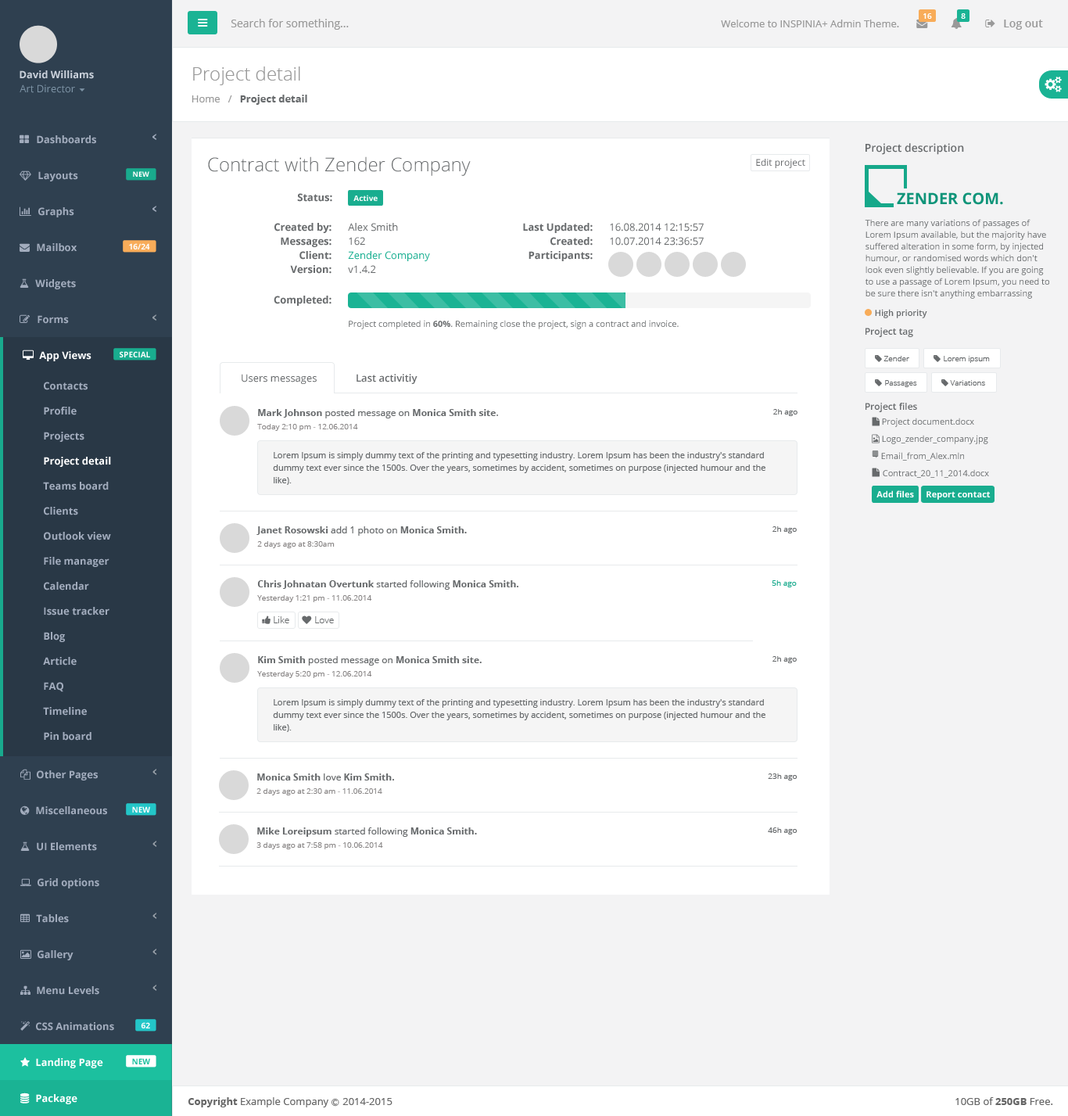
<style>
.page{position:relative;width:1068px;height:1116px;background:#ffffff}
.page>*{position:absolute;margin:0}
.t1{font:7.8px "OpenSans-Semibold";color:#ffffff}
.t2{font:11px "OpenSans";color:#999999}
.t3{font:10.2px "OpenSans";color:#999999}
.t4{font:11px "OpenSans-Semibold";color:#999999}
.t5{font:10.2px "OpenSans-Bold";color:#cad1db}
.t6{font:18.8px "OpenSans-Light";color:#999999}
.t7{font:10.2px "OpenSans";color:#7d93a5}
.t8{font:10.2px "OpenSans-Bold";color:#676a6c}
.t9{font:10.2px "OpenSans-Bold";color:#a2acbd}
.t10{font:11px "OpenSans-Semibold";color:#676a6c}
.t11{font:18.8px "OpenSans-Light";color:#676a6c}
.t12{font:9.4px "OpenSans";color:#676a6c}
.t13{font:7px "OpenSans-Bold";color:#fefefe}
.t14{font:7.7px "OpenSans-Bold";color:#fefefe}
.t15{font:15.6px "OpenSans-Bold";color:#0f9479}
.t16{font:8.6px/11.7px "OpenSans";color:#676a6c}
.t17{font:10.2px "OpenSans";color:#676a6c}
.t18{font:7.8px "OpenSans-Bold";color:#fefefe}
.t19{font:10.2px "OpenSans";color:#19af91}
.t20{font:8.6px "OpenSans-Semibold";color:#676a6c}
.t21{font:8.6px "OpenSans";color:#676a6c}
.t22{font:8.6px "OpenSans-Bold";color:#676a6c}
.t23{font:9.4px "OpenSans-Semibold";color:#676a6c}
.t24{font:10.2px "OpenSans-Bold";color:#ffffff}
.t25{font:7.8px "OpenSans-Light";color:#676a6c}
.t26{font:10.2px "OpenSans-Semibold";color:#676a6c}
.t27{font:9.4px "OpenSans-Bold";color:#676a6c}
.t28{font:7.8px "OpenSans";color:#676a6c}
.t29{font:7.8px "OpenSans";color:#8b8888}
.t30{font:8.6px/12.5px "OpenSans";color:#676a6c}
.t31{font:8.6px "OpenSans-Bold";color:#fefefe}
.t32{font:7.8px "OpenSans";color:#19aa8d}
.t33{font:9.4px "OpenSans-Light";color:#676a6c}
.t34{font:7.8px "OpenSans-Bold";color:#1cc09f}
.t35{font:10.2px "OpenSans";color:#666666}
.t36{font:10.2px "OpenSans-Bold";color:#666666}
.t37{font:7.8px "Meiryo";color:#666666}
</style>
<div class="page">
<p class="t1" style="left:924px;top:13px;width:8px;height:6px">16</p>
<p class="t1" style="left:961px;top:13px;width:5px;height:6px">8</p>
<p class="t2" style="left:231px;top:19px;width:118px;height:11px">Search for something...</p>
<p class="t3" style="left:721px;top:20px;width:178px;height:7px">Welcome to INSPINIA+ Admin Theme.</p>
<p class="t4" style="left:1004px;top:20px;width:39px;height:10px">Log out</p>
<p class="t5" style="left:20px;top:70px;width:74px;height:9px">David Williams</p>
<p class="t6" style="left:193px;top:66px;width:107px;height:19px">Project detail</p>
<p class="t7" style="left:20px;top:84px;width:55px;height:9px">Art Director</p>
<p class="t8" style="left:192px;top:95px;width:115px;height:10px"><span class="t3">Home   /   </span>Project detail</p>
<p class="t9" style="left:37px;top:135px;width:59px;height:9px">Dashboards</p>
<p class="t10" style="left:866px;top:143px;width:98px;height:12px">Project description</p>
<p class="t11" style="left:208px;top:156px;width:263px;height:20px">Contract with Zender Company</p>
<p class="t12" style="left:756px;top:159px;width:50px;height:9px">Edit project</p>
<p class="t9" style="left:38px;top:171px;width:40px;height:10px">Layouts</p>
<p class="t13" style="left:133px;top:171px;width:16px;height:6px">NEW</p>
<p class="t8" style="left:297px;top:193px;width:35px;height:9px">Status:</p>
<p class="t14" style="left:354px;top:195px;width:24px;height:6px">Active</p>
<p class="t15" style="left:897px;top:192px;width:106px;height:13px">ZENDER COM.</p>
<p class="t9" style="left:38px;top:207px;width:36px;height:10px">Graphs</p>
<p class="t16" style="left:865px;top:219px;width:185px;height:80px">There are many variations of passages of Lorem Ipsum available, but the majority have suffered alteration in some form, by injected humour, or randomised words which don't look even slightly believable. If you are going to use a passage of Lorem Ipsum, you need to be sure there isn't anything embarrassing</p>
<p class="t8" style="left:275px;top:223px;width:57px;height:10px">Created by:</p>
<p class="t17" style="left:348px;top:223px;width:50px;height:9px">Alex Smith</p>
<p class="t8" style="left:523px;top:223px;width:70px;height:10px">Last Updated:</p>
<p class="t17" style="left:610px;top:223px;width:94px;height:9px">16.08.2014 12:15:57</p>
<p class="t9" style="left:37px;top:243px;width:40px;height:9px">Mailbox</p>
<p class="t18" style="left:129px;top:243px;width:21px;height:6px">16/24</p>
<p class="t8" style="left:281px;top:237px;width:51px;height:10px">Messages:</p>
<p class="t17" style="left:349px;top:237px;width:16px;height:9px">162</p>
<p class="t8" style="left:551px;top:237px;width:42px;height:9px">Created:</p>
<p class="t17" style="left:610px;top:237px;width:94px;height:9px">10.07.2014 23:36:57</p>
<p class="t8" style="left:300px;top:251px;width:32px;height:9px">Client:</p>
<p class="t19" style="left:348px;top:251px;width:82px;height:10px">Zender Company</p>
<p class="t8" style="left:529px;top:251px;width:64px;height:10px">Participants:</p>
<p class="t8" style="left:290px;top:265px;width:42px;height:9px">Version:</p>
<p class="t17" style="left:348px;top:265px;width:28px;height:9px">v1.4.2</p>
<p class="t9" style="left:35px;top:279px;width:41px;height:10px">Widgets</p>
<p class="t8" style="left:274px;top:296px;width:58px;height:10px">Completed:</p>
<p class="t9" style="left:38px;top:315px;width:31px;height:9px">Forms</p>
<p class="t20" style="left:875px;top:309px;width:53px;height:9px">High priority</p>
<p class="t21" style="left:349px;top:320px;width:330px;height:9px">Project completed in <span class="t22">60%</span>. Remaining close the project, sign a contract and invoice.</p>
<p class="t23" style="left:866px;top:328px;width:48px;height:9px">Project tag</p>
<p class="t24" style="left:39px;top:351px;width:53px;height:10px">App Views</p>
<p class="t18" style="left:120px;top:351px;width:30px;height:6px">SPECIAL</p>
<p class="t25" style="left:884px;top:356px;width:26px;height:5px">Zender</p>
<p class="t25" style="left:944px;top:356px;width:46px;height:7px">Lorem ipsum</p>
<p class="t17" style="left:242px;top:374px;width:75px;height:10px">Users messages</p>
<p class="t26" style="left:357px;top:374px;width:61px;height:10px">Last activitiy</p>
<p class="t9" style="left:44px;top:382px;width:44px;height:8px">Contacts</p>
<p class="t25" style="left:885px;top:380px;width:32px;height:7px">Passages</p>
<p class="t25" style="left:950px;top:380px;width:35px;height:6px">Variations</p>
<p class="t9" style="left:44px;top:407px;width:33px;height:8px">Profile</p>
<p class="t12" style="left:258px;top:409px;width:240px;height:9px"><span class="t27">Mark Johnson </span>posted message on <span class="t27">Monica Smith site</span>.</p>
<p class="t28" style="left:774px;top:409px;width:24px;height:7px">2h ago</p>
<p class="t23" style="left:866px;top:403px;width:51px;height:9px">Project files</p>
<p class="t29" style="left:257px;top:424px;width:101px;height:7px">Today 2:10 pm - 12.06.2014</p>
<p class="t21" style="left:882px;top:418px;width:93px;height:9px">Project document.docx</p>
<p class="t9" style="left:44px;top:432px;width:40px;height:10px">Projects</p>
<p class="t21" style="left:882px;top:435px;width:107px;height:9px">Logo_zender_company.jpg</p>
<p class="t24" style="left:44px;top:457px;width:67px;height:10px">Project detail</p>
<p class="t30" style="left:273px;top:452px;width:493px;height:33px">Lorem Ipsum is simply dummy text of the printing and typesetting industry. Lorem Ipsum has been the industry's standard dummy text ever since the 1500s. Over the years, sometimes by accident, sometimes on purpose (injected humour and the like).</p>
<p class="t21" style="left:881px;top:452px;width:83px;height:9px">Email_from_Alex.mln</p>
<p class="t21" style="left:883px;top:469px;width:106px;height:9px">Contract_20_11_2014.docx</p>
<p class="t9" style="left:43px;top:482px;width:66px;height:8px">Teams board</p>
<p class="t31" style="left:877px;top:490px;width:37px;height:7px">Add files</p>
<p class="t31" style="left:927px;top:491px;width:64px;height:9px">Report contact</p>
<p class="t9" style="left:44px;top:507px;width:34px;height:8px">Clients</p>
<p class="t9" style="left:44px;top:532px;width:67px;height:8px">Outlook view</p>
<p class="t27" style="left:257px;top:526px;width:210px;height:10px">Janet Rosowski <span class="t12">add 1 photo on</span> Monica Smith.</p>
<p class="t28" style="left:773px;top:526px;width:24px;height:7px">2h ago</p>
<p class="t29" style="left:257px;top:541px;width:78px;height:7px">2 days ago at 8:30am</p>
<p class="t9" style="left:44px;top:557px;width:65px;height:10px">File manager</p>
<p class="t9" style="left:44px;top:582px;width:45px;height:9px">Calendar</p>
<p class="t27" style="left:257px;top:580px;width:262px;height:10px">Chris Johnatan Overtunk <span class="t12">started following </span>Monica Smith.</p>
<p class="t32" style="left:772px;top:580px;width:25px;height:7px">5h ago</p>
<p class="t29" style="left:257px;top:595px;width:115px;height:7px">Yesterday 1:21 pm - 11.06.2014</p>
<p class="t9" style="left:44px;top:607px;width:65px;height:9px">Issue tracker</p>
<p class="t33" style="left:274px;top:616px;width:15px;height:7px">Like</p>
<p class="t33" style="left:315px;top:616px;width:19px;height:7px">Love</p>
<p class="t9" style="left:44px;top:632px;width:21px;height:10px">Blog</p>
<p class="t9" style="left:43px;top:657px;width:34px;height:9px">Article</p>
<p class="t27" style="left:258px;top:656px;width:224px;height:10px">Kim Smith <span class="t12">posted message on </span>Monica Smith site.</p>
<p class="t28" style="left:773px;top:656px;width:24px;height:7px">2h ago</p>
<p class="t29" style="left:257px;top:671px;width:115px;height:7px">Yesterday 5:20 pm - 12.06.2014</p>
<p class="t9" style="left:44px;top:682px;width:19px;height:10px">FAQ</p>
<p class="t30" style="left:273px;top:699px;width:493px;height:33px">Lorem Ipsum is simply dummy text of the printing and typesetting industry. Lorem Ipsum has been the industry's standard dummy text ever since the 1500s. Over the years, sometimes by accident, sometimes on purpose (injected humour and the like).</p>
<p class="t9" style="left:43px;top:707px;width:44px;height:9px">Timeline</p>
<p class="t9" style="left:44px;top:732px;width:48px;height:9px">Pin board</p>
<p class="t9" style="left:37px;top:770px;width:61px;height:11px">Other Pages</p>
<p class="t27" style="left:257px;top:774px;width:137px;height:7px">Monica Smith <span class="t12">love</span> Kim Smith.</p>
<p class="t28" style="left:768px;top:774px;width:30px;height:7px">23h ago</p>
<p class="t29" style="left:257px;top:788px;width:125px;height:7px">2 days ago at 2:30 am - 11.06.2014</p>
<p class="t9" style="left:36px;top:806px;width:71px;height:9px">Miscellaneous</p>
<p class="t18" style="left:132px;top:806px;width:18px;height:7px">NEW</p>
<p class="t12" style="left:257px;top:827px;width:220px;height:10px"><span class="t27">Mike Loreipsum </span>started following <span class="t27">Monica Smith.</span></p>
<p class="t28" style="left:768px;top:827px;width:30px;height:8px">46h ago</p>
<p class="t9" style="left:37px;top:842px;width:60px;height:9px">UI Elements</p>
<p class="t29" style="left:257px;top:842px;width:126px;height:7px">3 days ago at 7:58 pm - 10.06.2014</p>
<p class="t9" style="left:38px;top:878px;width:61px;height:11px">Grid options</p>
<p class="t9" style="left:36px;top:914px;width:33px;height:9px">Tables</p>
<p class="t9" style="left:38px;top:950px;width:36px;height:10px">Gallery</p>
<p class="t9" style="left:37px;top:986px;width:62px;height:9px">Menu Levels</p>
<p class="t9" style="left:36px;top:1022px;width:78px;height:9px">CSS Animations</p>
<p class="t18" style="left:141px;top:1022px;width:9px;height:7px">62</p>
<p class="t24" style="left:36px;top:1058px;width:67px;height:10px">Landing Page</p>
<p class="t34" style="left:132px;top:1058px;width:18px;height:6px">NEW</p>
<p class="t24" style="left:36px;top:1094px;width:41px;height:10px">Package</p>
<p class="t35" style="left:188px;top:1097px;width:205px;height:10px"><span class="t36">Copyright</span> Example Company <span class="t37">Ⓒ </span>2014-2015</p>
<p class="t35" style="left:956px;top:1097px;width:98px;height:8px">10GB of <span class="t36">250GB</span> Free.</p>
</div>
